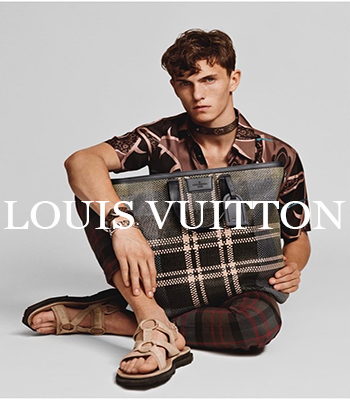
<style>
.page{position:relative;width:350px;height:400px}
.page>*{position:absolute;margin:0}
.t1{font:40px "Georgia";color:#fffefe;scale:1.09 1}
</style>
<div class="page">
<p class="t1" style="left:4px;top:201px;width:342px;height:28px">LOUIS VUITTON</p>
</div>
